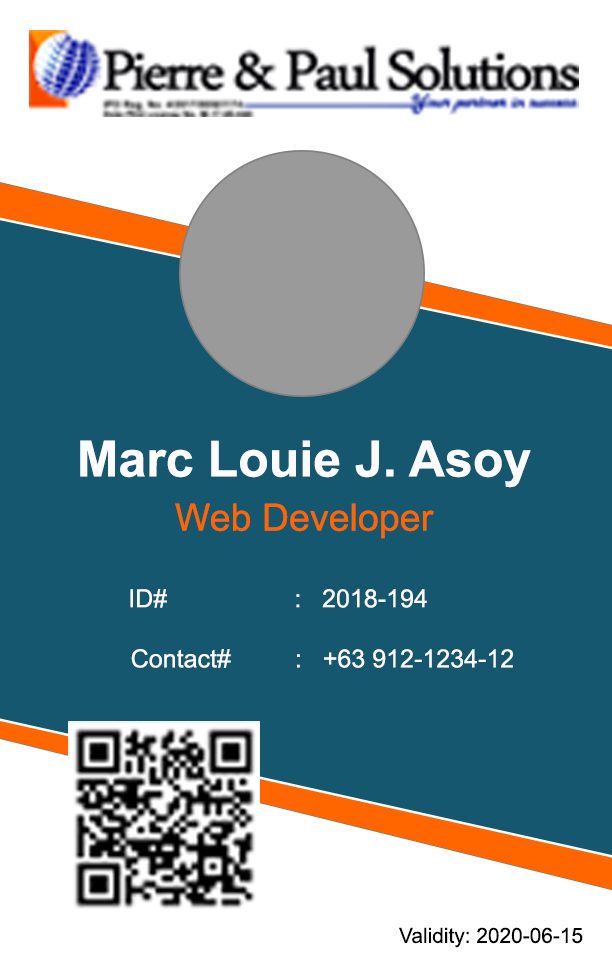
<style>
.page{position:relative;width:612px;height:972px;background:#15576f}
.page>*{position:absolute;margin:0}
.t1{font:50.1px "Arial-BoldMT";color:#fcfbff}
.t2{font:37.6px "ArialMT";color:#ff6601}
.t3{font:25.1px "ArialMT";color:#fcfbff}
.t4{font:20.9px "ArialMT";color:#000000}
</style>
<div class="page">
<p class="t1" style="left:80px;top:440px;width:451px;height:48px">Marc Louie J. Asoy</p>
<p class="t2" style="left:175px;top:503px;width:259px;height:36px">Web Developer</p>
<p class="t3" style="left:130px;top:589px;width:37px;height:19px">ID#</p>
<p class="t3" style="left:296px;top:589px;width:131px;height:19px">:   2018-194</p>
<p class="t3" style="left:131px;top:649px;width:100px;height:19px">Contact#</p>
<p class="t3" style="left:297px;top:649px;width:216px;height:19px">:   +63 912-1234-12</p>
<p class="t4" style="left:399px;top:927px;width:184px;height:21px">Validity: 2020-06-15</p>
</div>
